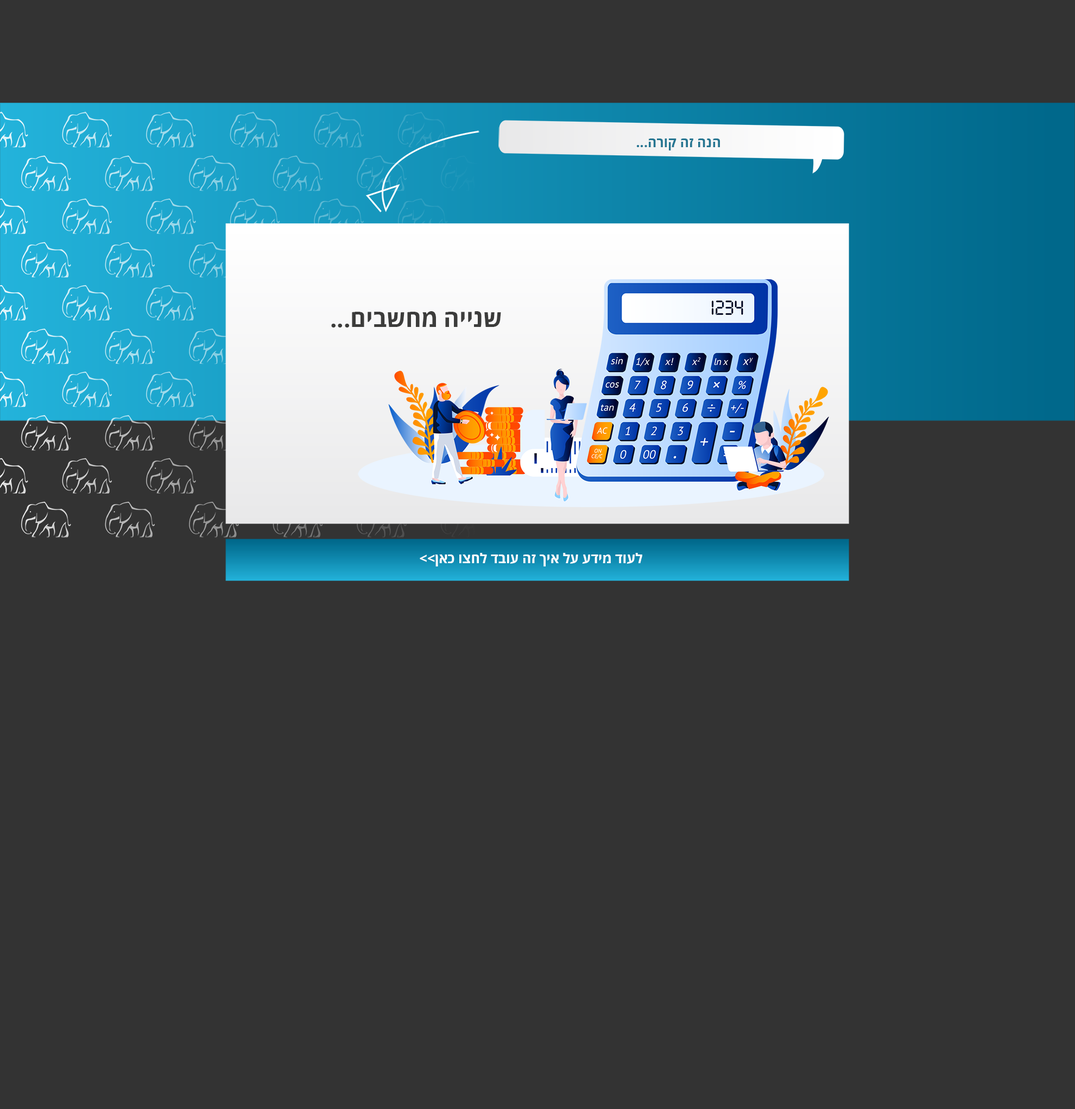
<style>
.page{position:relative;width:1075px;height:1109px;background:#333333}
.page>*{position:absolute;margin:0}
.t1{font:13.6px "OpenSansHebrew-Bold";color:#247591}
.t2{font:23.8px "OpenSansHebrew-Bold";color:#3c3c3b}
.t3{font:13.6px "OpenSansHebrew-Bold";color:#ffffff}
</style>
<div class="page">
<p class="t1" style="left:636px;top:138px;width:84px;height:12px">...הרוק הז הנה</p>
<p class="t2" style="left:331px;top:311px;width:170px;height:16px">...םיבשחמ היינש</p>
<p class="t3" style="left:420px;top:553px;width:222px;height:13px">לעוד מידע על איך זה עובד לחצו כאן&gt;&gt;</p>
</div>
